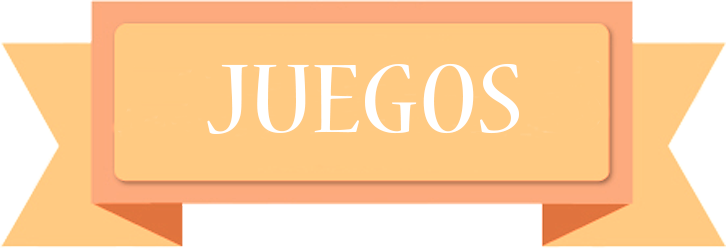
<style>
.page{position:relative;width:726px;height:248px;background:#ffca82}
.page>*{position:absolute;margin:0}
.t1{font:109px "NuevaStd-Cond";color:#ffffff;scale:1.26 1}
</style>
<div class="page">
<p class="t1" style="left:207px;top:63px;width:312px;height:71px">JUEGOS</p>
</div>
